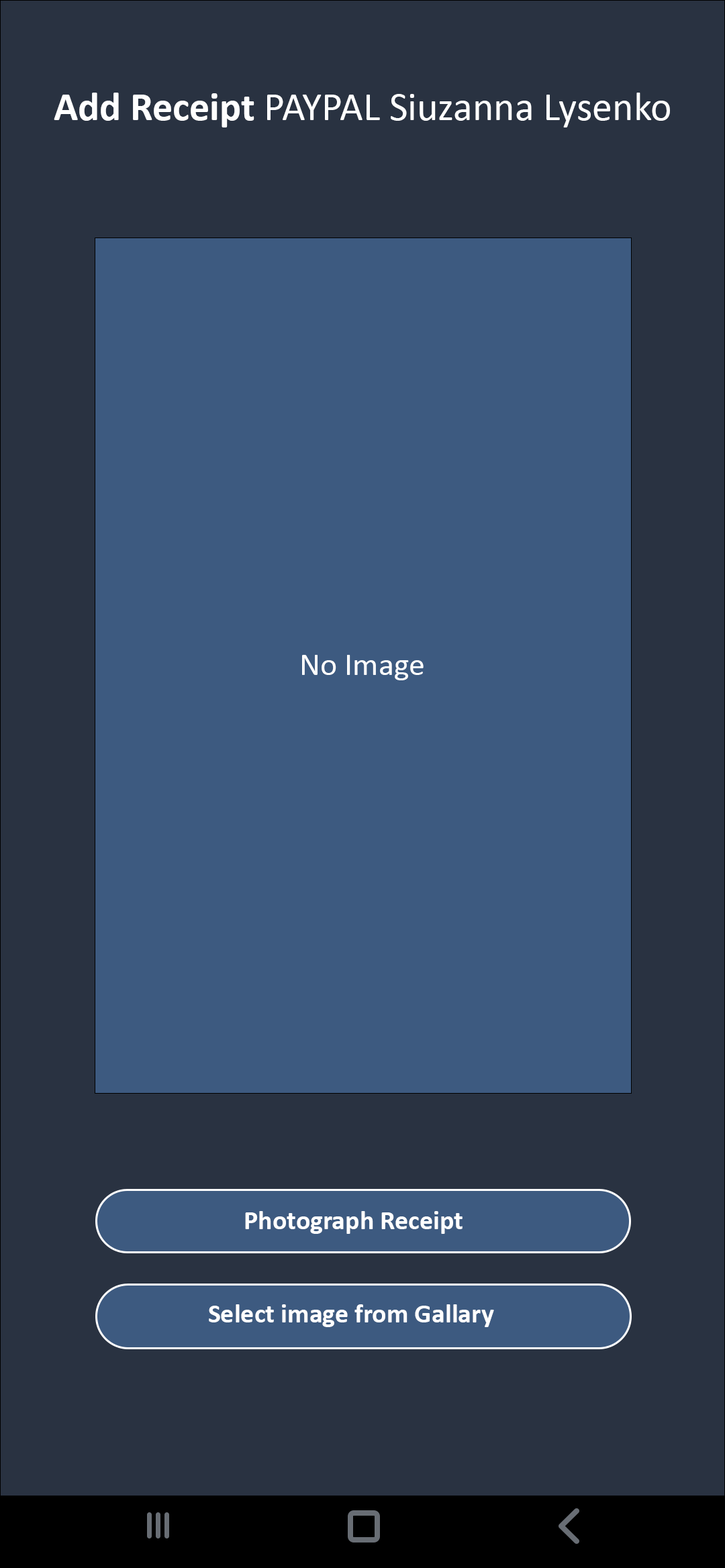
<style>
.page{position:relative;width:725px;height:1568px;background:#293241}
.page>*{position:absolute;margin:0}
.t1{font:40.3px "Calibri";color:#ffffff}
.t2{font:40.3px "Calibri-Bold";color:#ffffff}
.t3{font:32.2px "Calibri";color:#ffffff}
.t4{font:26.8px "Calibri-Bold";color:#ffffff}
</style>
<div class="page">
<p class="t1" style="left:54px;top:93px;width:616px;height:34px"><span class="t2">Add Receipt </span>PAYPAL Siuzanna Lysenko</p>
<p class="t3" style="left:302px;top:655px;width:121px;height:25px">No Image</p>
<p class="t4" style="left:245px;top:1211px;width:217px;height:23px">Photograph Receipt</p>
<p class="t4" style="left:209px;top:1304px;width:285px;height:23px">Select image from Gallary</p>
</div>
